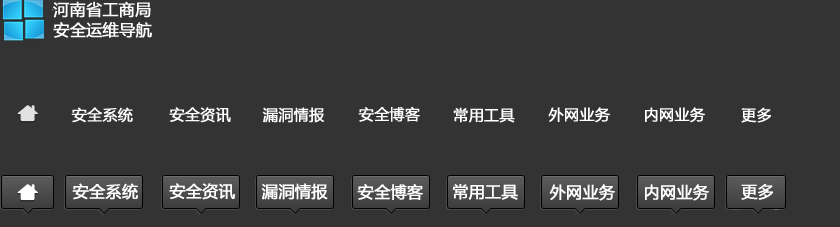
<style>
.page{position:relative;width:840px;height:227px;background:#333333}
.page>*{position:absolute;margin:0}
.t1{font:16px "MicrosoftYaHei";color:#ffffff;font-weight:bold}
.t2{font:15px "MicrosoftYaHei";color:#ffffff;font-weight:bold}
</style>
<div class="page">
<p class="t1" style="left:53px;top:1px;width:98px;height:17px">河南省工商局</p>
<p class="t1" style="left:53px;top:22px;width:99px;height:16px">安全运维导航</p>
<p class="t2" style="left:71px;top:107px;width:62px;height:16px">安全系统</p>
<p class="t2" style="left:169px;top:107px;width:62px;height:16px">安全资讯</p>
<p class="t2" style="left:262px;top:107px;width:63px;height:16px">漏洞情报</p>
<p class="t2" style="left:358px;top:106px;width:62px;height:16px">安全博客</p>
<p class="t2" style="left:453px;top:107px;width:62px;height:16px">常用工具</p>
<p class="t2" style="left:548px;top:107px;width:63px;height:16px">外网业务</p>
<p class="t2" style="left:645px;top:107px;width:61px;height:16px">内网业务</p>
<p class="t2" style="left:741px;top:107px;width:30px;height:16px">更多</p>
<p class="t1" style="left:72px;top:183px;width:66px;height:17px">安全系统</p>
<p class="t1" style="left:169px;top:183px;width:66px;height:17px">安全资讯</p>
<p class="t1" style="left:261px;top:183px;width:67px;height:17px">漏洞情报</p>
<p class="t1" style="left:357px;top:184px;width:66px;height:16px">安全博客</p>
<p class="t1" style="left:453px;top:184px;width:65px;height:16px">常用工具</p>
<p class="t1" style="left:549px;top:184px;width:66px;height:17px">外网业务</p>
<p class="t1" style="left:645px;top:184px;width:64px;height:17px">内网业务</p>
<p class="t1" style="left:741px;top:184px;width:32px;height:16px">更多</p>
</div>
